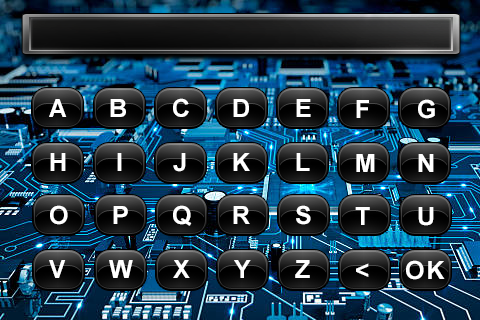
<style>
.page{position:relative;width:480px;height:320px}
.page>*{position:absolute;margin:0}
.t1{font:25px "Arial-BoldMT";letter-spacing:0.075em;color:#ffffff}
</style>
<div class="page">
<p class="t1" style="left:49px;top:99px;width:18px;height:18px">A</p>
<p class="t1" style="left:110px;top:99px;width:16px;height:18px">B</p>
<p class="t1" style="left:173px;top:98px;width:16px;height:19px">C</p>
<p class="t1" style="left:233px;top:99px;width:16px;height:18px">D</p>
<p class="t1" style="left:296px;top:99px;width:15px;height:18px">E</p>
<p class="t1" style="left:356px;top:100px;width:13px;height:18px">F</p>
<p class="t1" style="left:418px;top:99px;width:17px;height:20px">G</p>
<p class="t1" style="left:50px;top:153px;width:16px;height:18px">H</p>
<p class="t1" style="left:117px;top:153px;width:5px;height:18px">I</p>
<p class="t1" style="left:173px;top:153px;width:13px;height:19px">J</p>
<p class="t1" style="left:233px;top:153px;width:17px;height:18px">K</p>
<p class="t1" style="left:296px;top:153px;width:14px;height:18px">L</p>
<p class="t1" style="left:356px;top:154px;width:19px;height:18px">M</p>
<p class="t1" style="left:418px;top:154px;width:16px;height:18px">N</p>
<p class="t1" style="left:50px;top:205px;width:18px;height:20px">O</p>
<p class="t1" style="left:113px;top:206px;width:15px;height:18px">P</p>
<p class="t1" style="left:173px;top:205px;width:19px;height:21px">Q</p>
<p class="t1" style="left:233px;top:206px;width:17px;height:18px">R</p>
<p class="t1" style="left:296px;top:205px;width:15px;height:20px">S</p>
<p class="t1" style="left:355px;top:207px;width:15px;height:18px">T</p>
<p class="t1" style="left:418px;top:207px;width:16px;height:19px">U</p>
<p class="t1" style="left:49px;top:260px;width:17px;height:18px">V</p>
<p class="t1" style="left:109px;top:260px;width:24px;height:18px">W</p>
<p class="t1" style="left:173px;top:260px;width:17px;height:18px">X</p>
<p class="t1" style="left:234px;top:260px;width:17px;height:18px">Y</p>
<p class="t1" style="left:295px;top:260px;width:15px;height:18px">Z</p>
<p class="t1" style="left:356px;top:263px;width:13px;height:14px">&lt;</p>
<p class="t1" style="left:406px;top:260px;width:39px;height:20px">OK</p>
</div>
